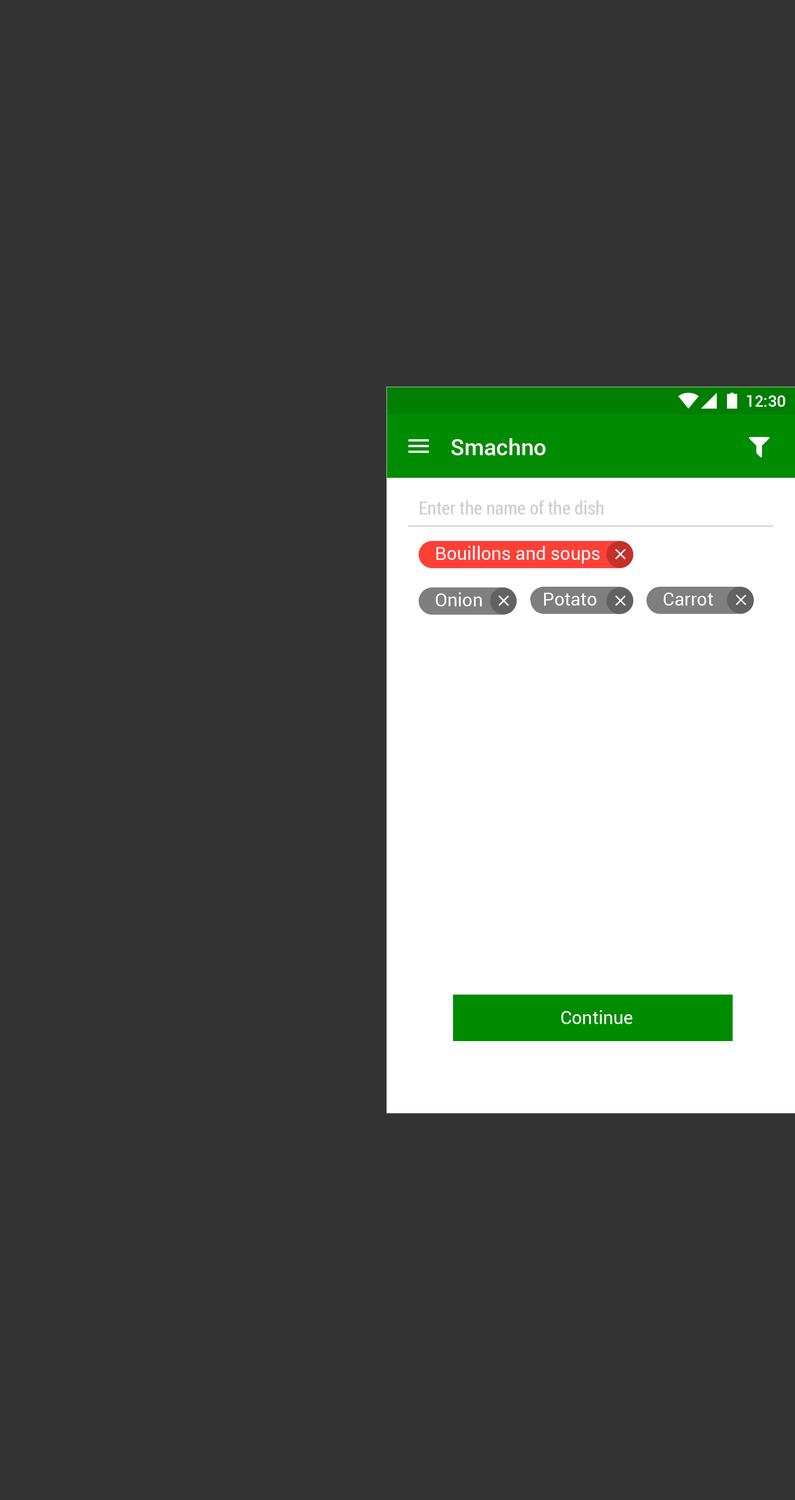
<style>
.page{position:relative;width:795px;height:1500px;background:#333333}
.page>*{position:absolute;margin:0}
.t1{font:15.9px "Roboto-Medium";color:#ffffff}
.t2{font:22.7px "Roboto-Medium";color:#ffffff}
.t3{font:18.1px "Roboto-Condensed";color:#cccccc}
.t4{font:18.1px "Roboto-Regular";color:#ffffff}
</style>
<div class="page">
<p class="t1" style="left:747px;top:395px;width:38px;height:12px">12:30</p>
<p class="t2" style="left:452px;top:438px;width:94px;height:17px">Smachno</p>
<p class="t3" style="left:420px;top:500px;width:184px;height:14px">Enter the name of the dish</p>
<p class="t4" style="left:437px;top:546px;width:163px;height:17px">Bouillons and soups</p>
<p class="t4" style="left:436px;top:592px;width:46px;height:14px">Оnion</p>
<p class="t4" style="left:544px;top:593px;width:52px;height:12px">Potato</p>
<p class="t4" style="left:664px;top:592px;width:49px;height:13px">Carrot</p>
<p class="t4" style="left:561px;top:1010px;width:72px;height:14px">Continue</p>
</div>
